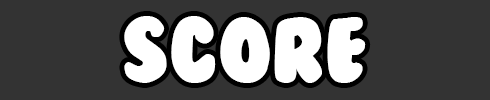
<style>
.page{position:relative;width:490px;height:100px;background:#333333}
.page>*{position:absolute;margin:0}
.t1{font:85px "BubbleGum";color:#ffffff}
</style>
<div class="page">
<p class="t1" style="left:124px;top:16px;width:242px;height:67px">Score</p>
</div>
